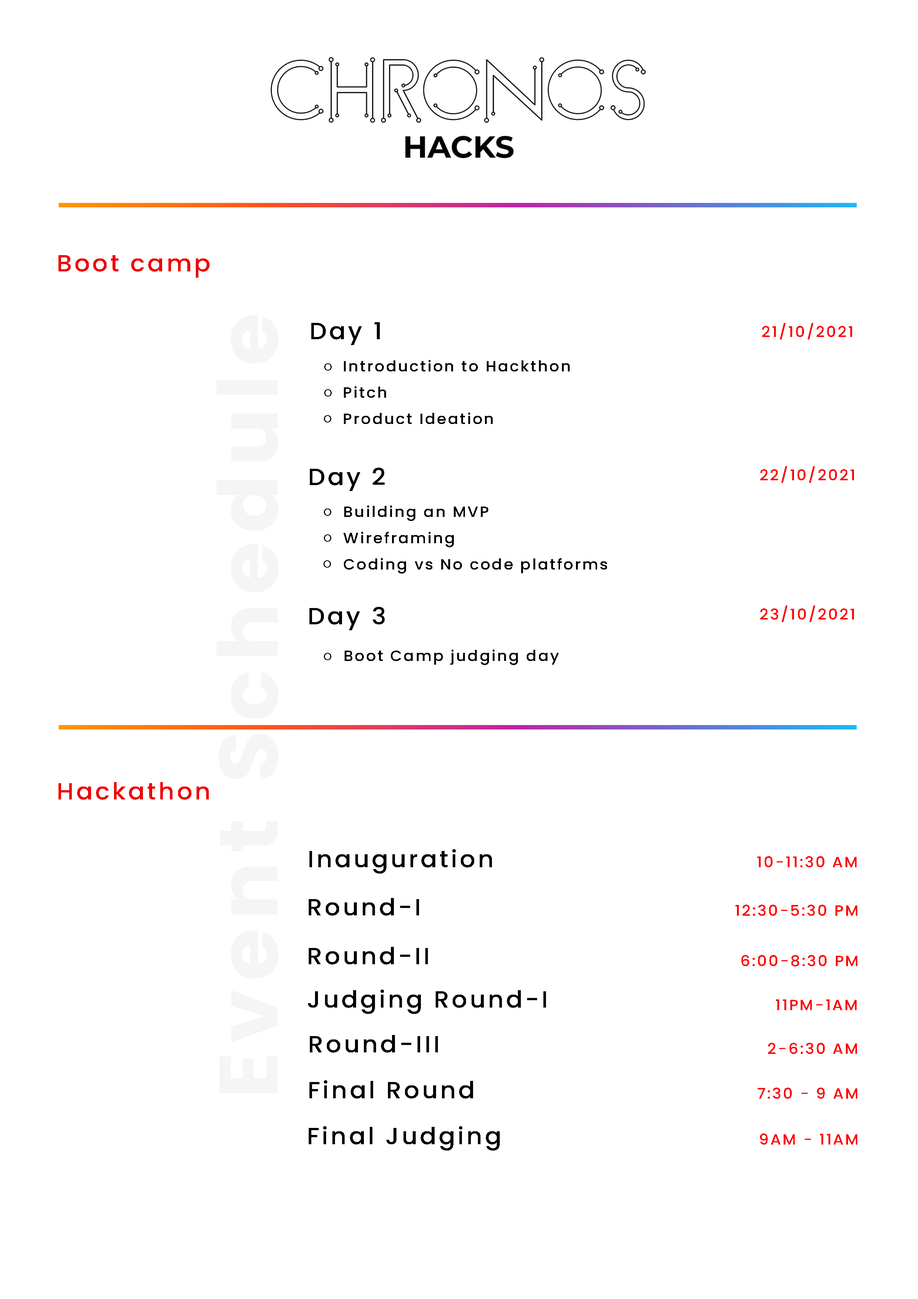
<style>
.page{position:relative;width:918px;height:1299px;background:#ffffff}
.page>*{position:absolute;margin:0}
.t1{font:23.4px "Poppins-Medium";letter-spacing:0.1em;color:#ef0000;scale:1.04 1}
.t2{font:82.7px "Poppins-Bold";letter-spacing:0.1em;color:#f5f5f5;scale:1.04 1}
.t3{font:23.4px "Poppins-Medium";letter-spacing:0.1em;color:#000000;scale:1.04 1}
.t4{font:14.8px "Poppins-Medium";letter-spacing:0.1em;color:#ff0000;scale:1.04 1}
.t5{font:14.8px/26.2px "Poppins-Medium";letter-spacing:0.1em;color:#000000;scale:1.04 1}
.t6{font:14.8px "Poppins-Medium";letter-spacing:0.1em;color:#000000;scale:1.04 1}
</style>
<div class="page">
<p class="t1" style="left:58px;top:255px;width:152px;height:23px">Boot camp</p>
<p class="t2" style="left:217px;top:315px;width:61px;height:778px;rotate:-90deg">Event Schedule</p>
<p class="t3" style="left:311px;top:322px;width:69px;height:23px">Day 1</p>
<p class="t4" style="left:762px;top:323px;width:90px;height:16px">21/10/2021</p>
<p class="t5" style="left:344px;top:360px;width:226px;height:64px">Introduction to Hackthon<br>Pitch<br>Product Ideation</p>
<p class="t3" style="left:310px;top:468px;width:75px;height:23px">Day 2</p>
<p class="t4" style="left:760px;top:466px;width:94px;height:17px">22/10/2021</p>
<p class="t5" style="left:344px;top:505px;width:263px;height:68px">Building an MVP<br>Wireframing<br>Coding vs No code platforms</p>
<p class="t4" style="left:760px;top:605px;width:94px;height:17px">23/10/2021</p>
<p class="t3" style="left:310px;top:607px;width:75px;height:23px">Day 3</p>
<p class="t6" style="left:345px;top:649px;width:214px;height:16px">Boot Camp judging day</p>
<p class="t1" style="left:58px;top:782px;width:151px;height:18px">Hackathon</p>
<p class="t3" style="left:310px;top:849px;width:182px;height:24px">Inauguration</p>
<p class="t4" style="left:757px;top:856px;width:100px;height:11px">10-11:30 AM</p>
<p class="t3" style="left:309px;top:898px;width:110px;height:18px">Round-I</p>
<p class="t4" style="left:736px;top:904px;width:121px;height:12px">12:30-5:30 PM</p>
<p class="t3" style="left:309px;top:947px;width:119px;height:17px">Round-II</p>
<p class="t4" style="left:742px;top:955px;width:115px;height:11px">6:00-8:30 PM</p>
<p class="t3" style="left:308px;top:989px;width:238px;height:25px">Judging Round-I</p>
<p class="t4" style="left:776px;top:999px;width:81px;height:11px">11PM-1AM</p>
<p class="t3" style="left:310px;top:1035px;width:128px;height:18px">Round-III</p>
<p class="t4" style="left:768px;top:1043px;width:89px;height:11px">2-6:30 AM</p>
<p class="t3" style="left:310px;top:1080px;width:163px;height:18px">Final Round</p>
<p class="t4" style="left:758px;top:1087px;width:99px;height:11px">7:30 - 9 AM</p>
<p class="t3" style="left:309px;top:1126px;width:191px;height:24px">Final Judging</p>
<p class="t4" style="left:760px;top:1133px;width:97px;height:11px">9AM - 11AM</p>
</div>
